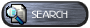
<style>
.page{position:relative;width:90px;height:28px}
.page>*{position:absolute;margin:0}
.t1{font:9px "Madison-Avenue";color:#ffffff}
</style>
<div class="page">
<p class="t1" style="left:32px;top:10px;width:36px;height:8px">SEARCH</p>
</div>
